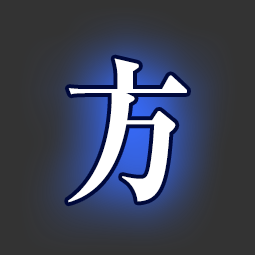
<style>
.page{position:relative;width:255px;height:255px;background:#333333}
.page>*{position:absolute;margin:0}
.t1{font:156px "RyuminPro-ExBold";letter-spacing:-0.08em;color:#ffffff;scale:0.83 1}
</style>
<div class="page">
<p class="t1" style="left:68px;top:58px;width:119px;height:145px">方</p>
</div>
